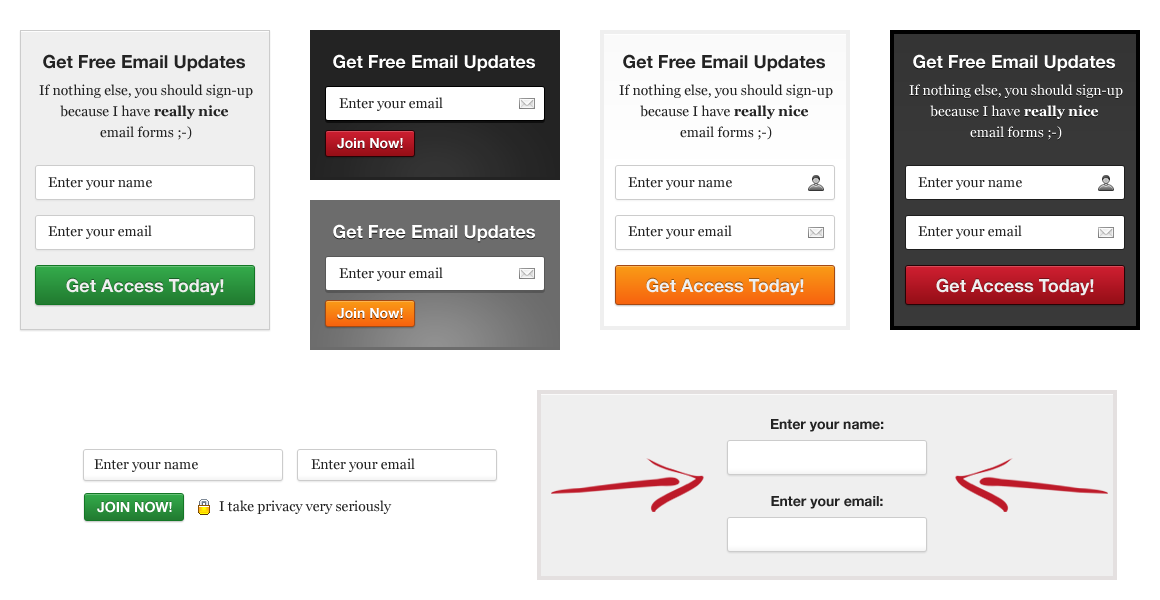
<style>
.page{position:relative;width:1160px;height:600px;background:#ffffff}
.page>*{position:absolute;margin:0}
.t1{font:18px "HelveticaNeue-Bold";color:#232323}
.t2{font:18px "HelveticaNeue-Bold";color:#ffffff}
.t3{font:14px/21px "Georgia";color:#232323}
.t4{font:14px/21px "Georgia-Bold";color:#232323}
.t5{font:14px/21px "Georgia";color:#ffffff}
.t6{font:14px/21px "Georgia-Bold";color:#ffffff}
.t7{font:14px "Georgia";color:#232323}
.t8{font:14px "HelveticaNeue-Bold";color:#ffffff}
.t9{font:18px "HelveticaNeue-Bold";color:#efefef}
.t10{font:14px "HelveticaNeue-Bold";color:#232323}
</style>
<div class="page">
<p class="t1" style="left:43px;top:54px;width:202px;height:18px">Get Free Email Updates</p>
<p class="t2" style="left:333px;top:54px;width:202px;height:18px">Get Free Email Updates</p>
<p class="t1" style="left:623px;top:54px;width:202px;height:18px">Get Free Email Updates</p>
<p class="t2" style="left:913px;top:54px;width:202px;height:18px">Get Free Email Updates</p>
<p class="t3" style="left:39px;top:84px;width:214px;height:56px;text-align:center">If nothing else, you should sign-up<br>because I have <span class="t4">really nice</span> <br>email forms ;-)</p>
<p class="t3" style="left:619px;top:84px;width:214px;height:56px;text-align:center">If nothing else, you should sign-up<br>because I have <span class="t4">really nice</span> <br>email forms ;-)</p>
<p class="t5" style="left:909px;top:84px;width:214px;height:56px;text-align:center">If nothing else, you should sign-up<br>because I have <span class="t6">really nice</span> <br>email forms ;-)</p>
<p class="t7" style="left:339px;top:97px;width:104px;height:14px">Enter your email</p>
<p class="t8" style="left:337px;top:138px;width:66px;height:11px">Join Now!</p>
<p class="t7" style="left:48px;top:177px;width:104px;height:13px">Enter your name</p>
<p class="t7" style="left:628px;top:177px;width:104px;height:13px">Enter your name</p>
<p class="t7" style="left:918px;top:177px;width:104px;height:13px">Enter your name</p>
<p class="t7" style="left:48px;top:225px;width:104px;height:14px">Enter your email</p>
<p class="t2" style="left:333px;top:224px;width:202px;height:18px">Get Free Email Updates</p>
<p class="t7" style="left:628px;top:225px;width:104px;height:14px">Enter your email</p>
<p class="t7" style="left:918px;top:225px;width:104px;height:14px">Enter your email</p>
<p class="t7" style="left:339px;top:267px;width:104px;height:14px">Enter your email</p>
<p class="t9" style="left:66px;top:278px;width:158px;height:18px">Get Access Today!</p>
<p class="t9" style="left:646px;top:278px;width:158px;height:18px">Get Access Today!</p>
<p class="t9" style="left:936px;top:278px;width:158px;height:18px">Get Access Today!</p>
<p class="t8" style="left:337px;top:308px;width:66px;height:11px">Join Now!</p>
<p class="t10" style="left:771px;top:419px;width:113px;height:13px">Enter your name:</p>
<p class="t7" style="left:94px;top:459px;width:104px;height:13px">Enter your name</p>
<p class="t7" style="left:311px;top:458px;width:104px;height:14px">Enter your email</p>
<p class="t10" style="left:771px;top:496px;width:112px;height:13px">Enter your email:</p>
<p class="t8" style="left:97px;top:501px;width:75px;height:12px">JOIN NOW!</p>
<p class="t7" style="left:219px;top:500px;width:173px;height:14px">I take privacy very seriously</p>
</div>
